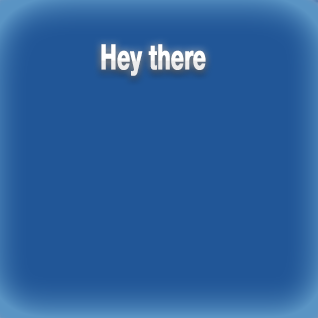
<style>
.page{position:relative;width:318px;height:318px;background:#215697}
.page>*{position:absolute;margin:0}
.t1{font:34.6px "HelveticaNeue-Bold";color:#ffffff;font-weight:bold;scale:0.64 1}
</style>
<div class="page">
<p class="t1" style="left:101px;top:44px;width:105px;height:32px">Hey there</p>
</div>
